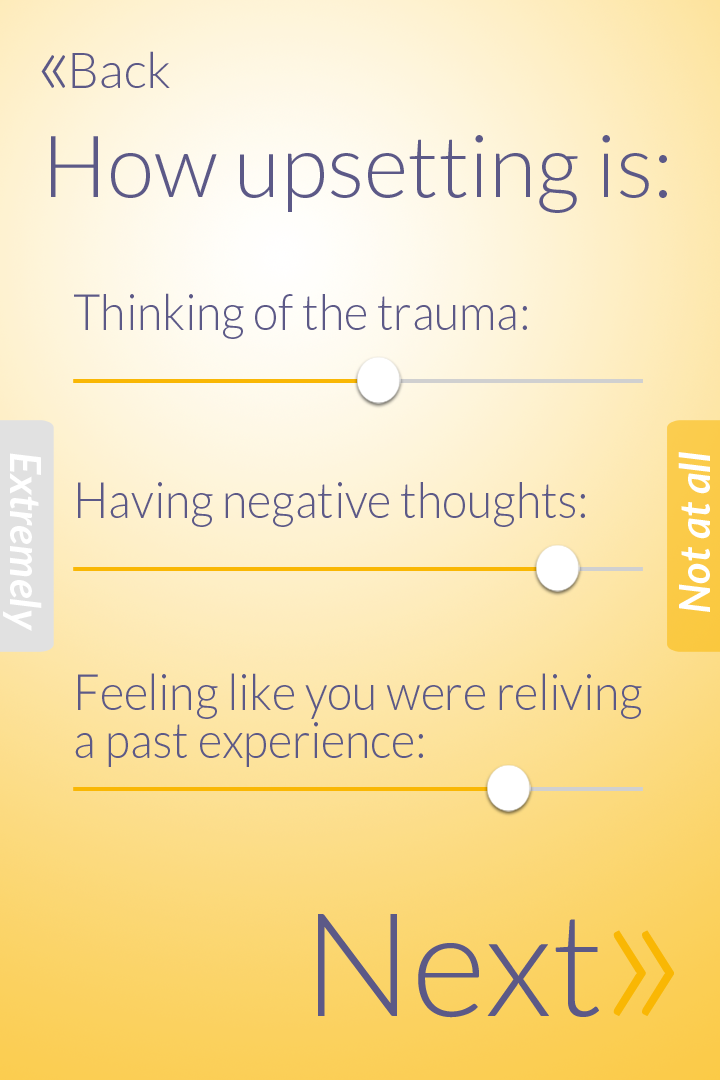
<style>
.page{position:relative;width:720px;height:1080px}
.page>*{position:absolute;margin:0}
.t1{font:50px "Lato-Light";color:#5c5987}
.t2{font:86px "Lato-Light";color:#5c5987}
.t3{font:50px "Lato-Light";color:#5c5987;scale:0.93 1}
.t4{font:42px "Lato-BoldItalic";color:#ffffff}
.t5{font:50px/48px "Lato-Light";color:#5c5987;scale:0.93 1}
.t6{font:144px "Lato-Light";color:#5c5987}
.t7{font:222px "Lato-Light";color:#f9b704}
</style>
<div class="page">
<p class="t1" style="left:72px;top:51px;width:98px;height:37px">Back</p>
<p class="t2" style="left:41px;top:55px;width:24px;height:33px">«</p>
<p class="t2" style="left:51px;top:135px;width:616px;height:78px">How upsetting is:</p>
<p class="t3" style="left:74px;top:293px;width:453px;height:46px">Thinking of the trauma:</p>
<p class="t4" style="left:3px;top:453px;width:39px;height:178px;rotate:90deg">Extremely</p>
<p class="t4" style="left:678px;top:452px;width:32px;height:160px;rotate:-90deg">Not at all</p>
<p class="t3" style="left:78px;top:482px;width:507px;height:45px">Having negative thoughts:</p>
<p class="t5" style="left:75px;top:673px;width:567px;height:94px">Feeling like you were reliving <br>a past experience:</p>
<p class="t6" style="left:318px;top:914px;width:281px;height:104px">Next</p>
<p class="t7" style="left:613px;top:930px;width:61px;height:86px">»</p>
</div>
